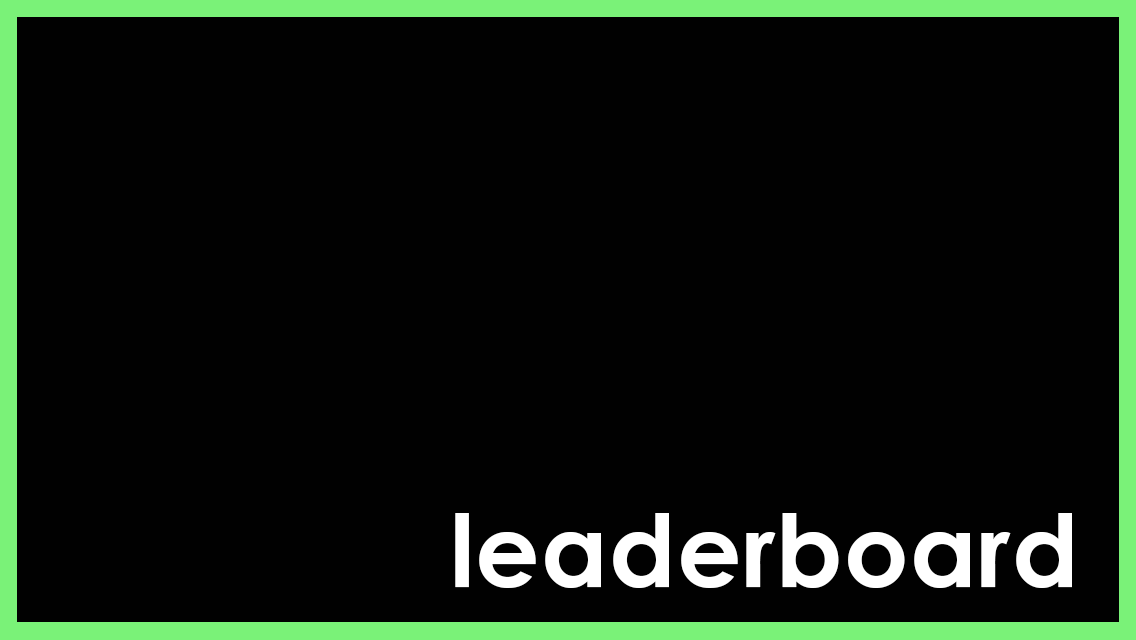
<style>
.page{position:relative;width:1136px;height:640px;background:#010101}
.page>*{position:absolute;margin:0}
.t1{font:101.4px "CenturyGothic-Bold";letter-spacing:0.01em;color:#ffffff}
</style>
<div class="page">
<p class="t1" style="left:455px;top:513px;width:617px;height:75px">leaderboard</p>
</div>
